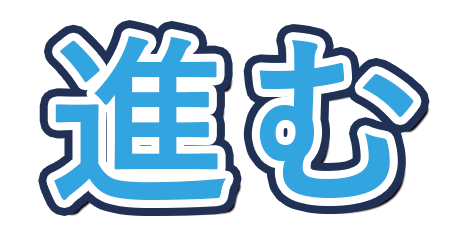
<style>
.page{position:relative;width:469px;height:235px;background:#ffffff}
.page>*{position:absolute;margin:0}
.t1{font:183.3px "YuGothic-Bold";letter-spacing:0.06em;color:#32a4df}
</style>
<div class="page">
<p class="t1" style="left:54px;top:36px;width:360px;height:164px">進む</p>
</div>
